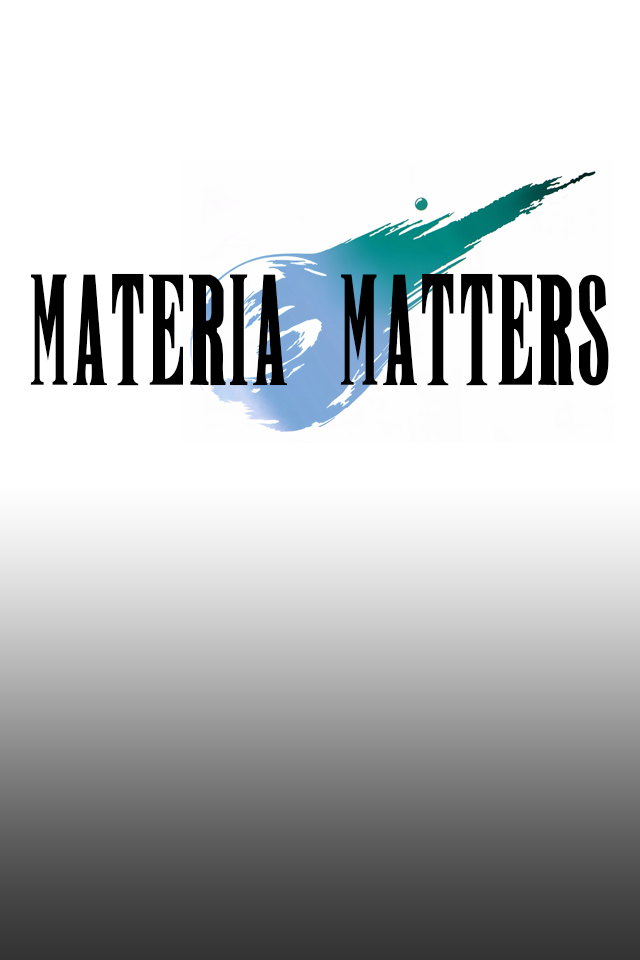
<style>
.page{position:relative;width:640px;height:960px;background:#ffffff}
.page>*{position:absolute;margin:0}
.t1{font:114.6px "New";color:#000000}
</style>
<div class="page">
<p class="t1" style="left:30px;top:273px;width:579px;height:113px">MATERIA MATTERS</p>
</div>
